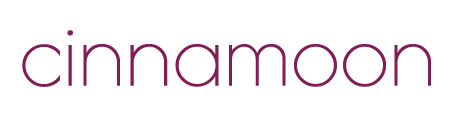
<style>
.page{position:relative;width:454px;height:113px;background:#ffffff}
.page>*{position:absolute;margin:0}
.t1{font:90px "PoiretOne-Regular";color:#811e56}
</style>
<div class="page">
<p class="t1" style="left:22px;top:30px;width:409px;height:57px">cinnamoon</p>
</div>
